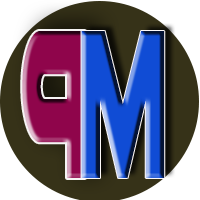
<style>
.page{position:relative;width:200px;height:200px}
.page>*{position:absolute;margin:0}
.t1{font:224.5px "AkiraExpanded-SuperBold";color:#8f054b;scale:0.32 1}
.t2{font:224.5px "AkiraExpanded-SuperBold";scale:0.32 1}
</style>
<div class="page">
<p class="t1" style="left:22px;top:31px;width:64px;height:147px;rotate:180deg">P</p>
<p class="t2" style="left:81px;top:31px;width:84px;height:147px">M</p>
</div>
